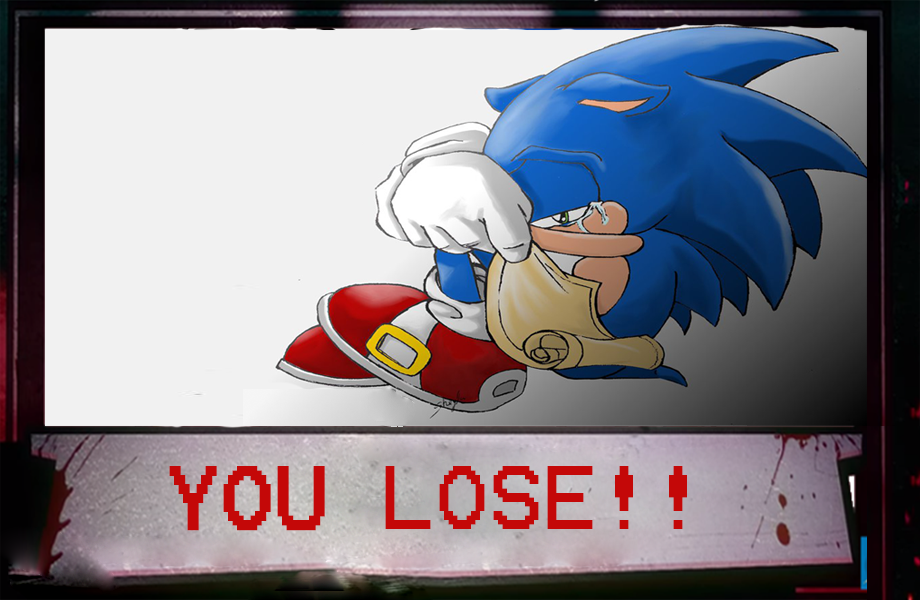
<style>
.page{position:relative;width:920px;height:600px;background:#f1f1f1}
.page>*{position:absolute;margin:0}
.t1{font:72px "Terminal";color:#c40808;text-transform:uppercase}
.t2{font:72px "Terminal";color:#c40808;text-transform:uppercase;font-weight:bold}
</style>
<div class="page">
<p class="t1" style="left:169px;top:466px;width:518px;height:65px"><span class="t2">you </span>LOSE!!</p>
</div>
